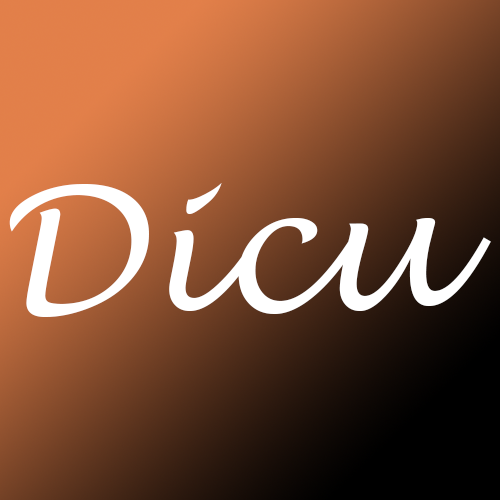
<style>
.page{position:relative;width:500px;height:500px}
.page>*{position:absolute;margin:0}
.t1{font:169.3px "LucidaHandwriting-Italic";color:#ffffff}
</style>
<div class="page">
<p class="t1" style="left:9px;top:183px;width:482px;height:134px">Dicu</p>
</div>
